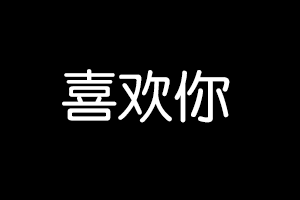
<style>
.page{position:relative;width:300px;height:200px;background:#000000}
.page>*{position:absolute;margin:0}
.t1{font:56.3px "FZY3JW--GB1-0";color:#ffffff}
</style>
<div class="page">
<p class="t1" style="left:62px;top:69px;width:168px;height:54px">喜欢你</p>
</div>
